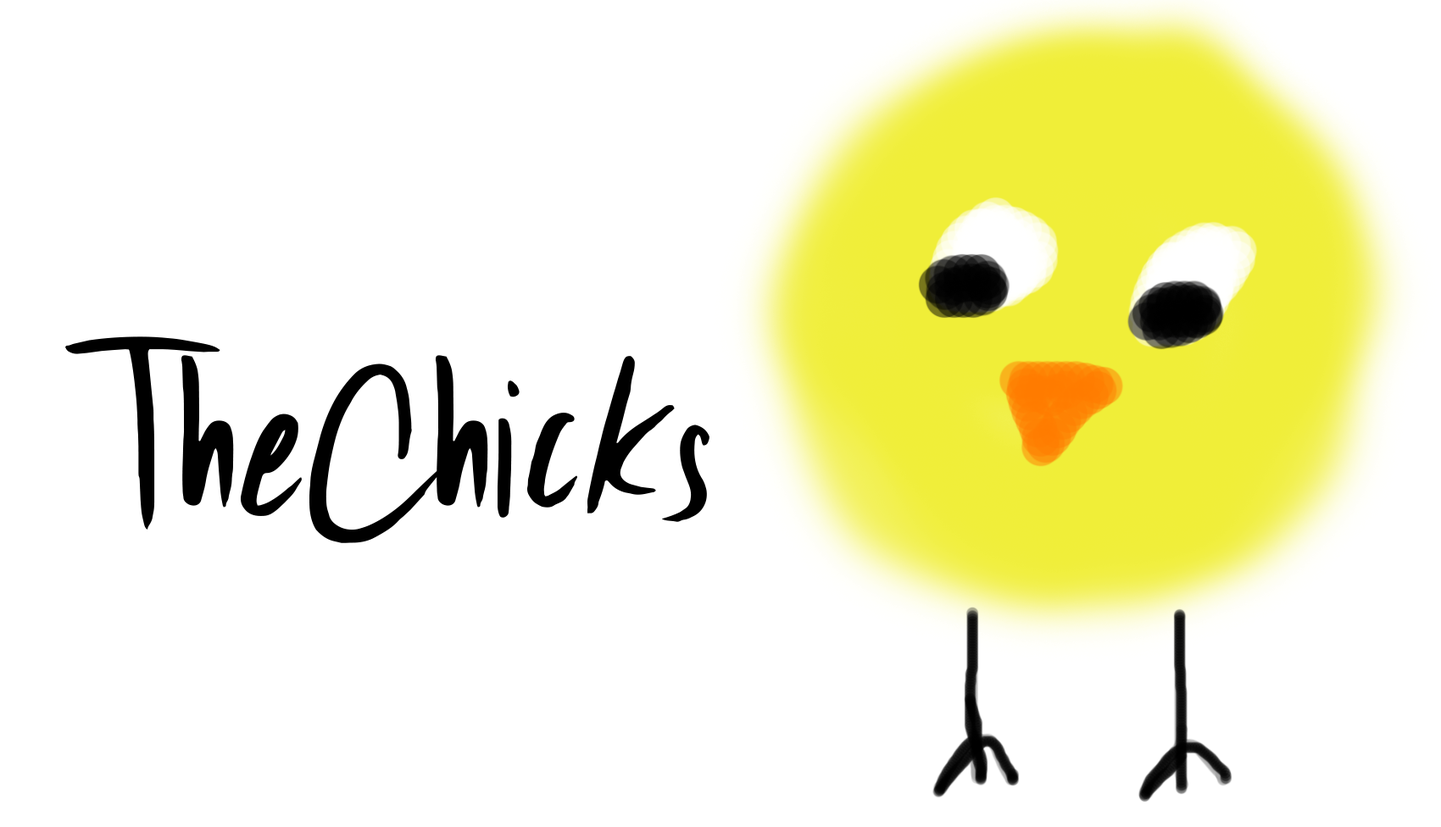
<style>
.page{position:relative;width:1441px;height:827px;background:#ffffff}
.page>*{position:absolute;margin:0}
.t1{font:254.3px "BushMarket-Regular";color:#000000}
</style>
<div class="page">
<p class="t1" style="left:65px;top:337px;width:645px;height:206px">TheChicks</p>
</div>
